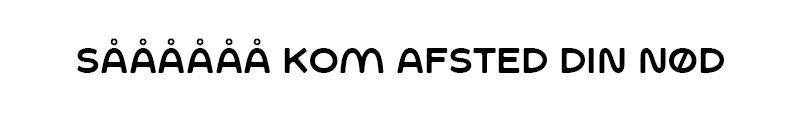
<style>
.page{position:relative;width:798px;height:117px;background:#ffffff}
.page>*{position:absolute;margin:0}
.t1{font:35.4px "SFCWosterSans-Regular";color:#000000}
</style>
<div class="page">
<p class="t1" style="left:77px;top:38px;width:647px;height:35px">såååååå kom afsted din nød</p>
</div>
